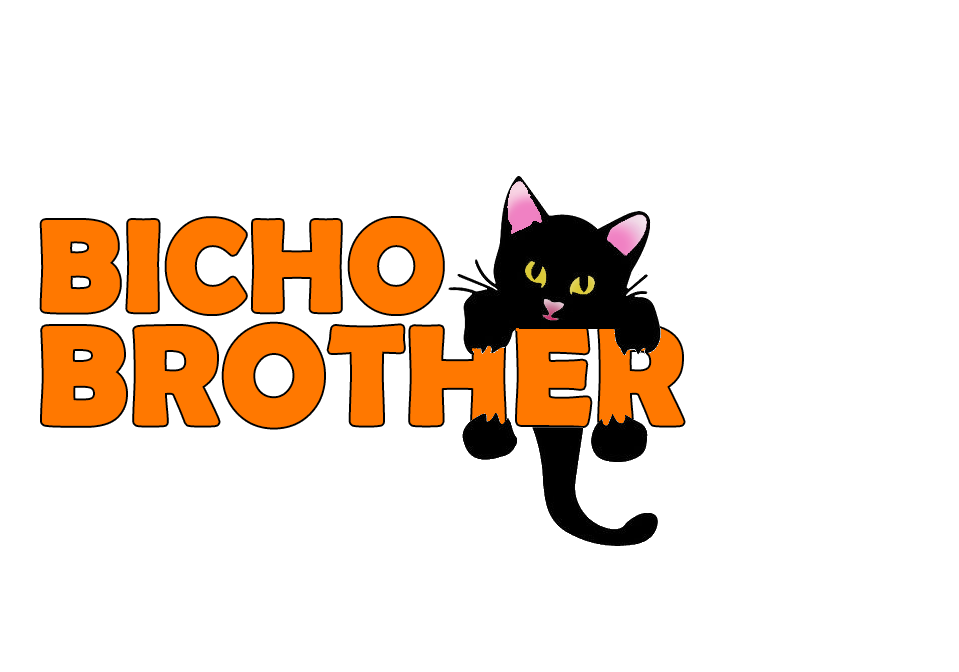
<style>
.page{position:relative;width:959px;height:672px;background:#ffffff}
.page>*{position:absolute;margin:0}
.t1{font:128.4px "BerlinSansFBDemi-Bold";color:#ff7800;text-transform:uppercase;font-weight:bold}
.t2{font:138.3px "BerlinSansFBDemi-Bold";color:#ff7800;text-transform:uppercase;font-weight:bold}
</style>
<div class="page">
<p class="t1" style="left:41px;top:218px;width:402px;height:96px">BICHO</p>
<p class="t2" style="left:42px;top:323px;width:642px;height:105px">BROTHER</p>
</div>
